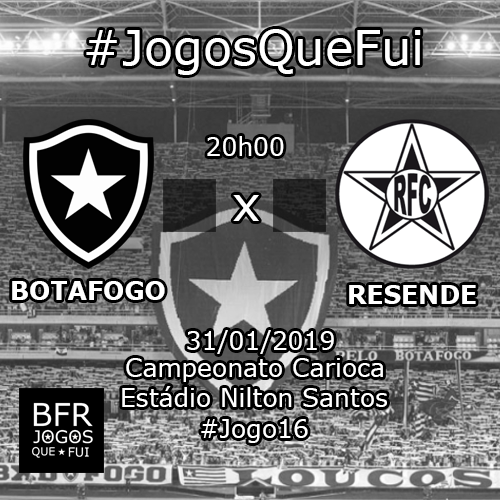
<style>
.page{position:relative;width:500px;height:500px}
.page>*{position:absolute;margin:0}
.t1{font:48px "Verdana";color:#ffffff}
.t2{font:25px "Verdana";color:#ffffff}
.t3{font:25px "Verdana-Bold";color:#ffffff}
</style>
<div class="page">
<p class="t1" style="left:86px;top:29px;width:335px;height:46px">#JogosQueFui</p>
<p class="t2" style="left:207px;top:136px;width:77px;height:20px">20h00</p>
<p class="t1" style="left:233px;top:195px;width:26px;height:26px">x</p>
<p class="t3" style="left:12px;top:281px;width:153px;height:19px">BOTAFOGO</p>
<p class="t3" style="left:349px;top:285px;width:127px;height:19px">RESENDE</p>
<p class="t2" style="left:187px;top:330px;width:147px;height:24px">31/01/2019</p>
<p class="t2" style="left:126px;top:358px;width:257px;height:24px">Campeonato Carioca</p>
<p class="t2" style="left:122px;top:386px;width:265px;height:21px">Estádio Nilton Santos</p>
<p class="t2" style="left:201px;top:419px;width:107px;height:24px">#Jogo16</p>
</div>
